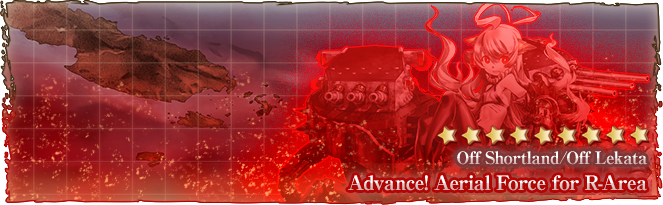
<style>
.page{position:relative;width:663px;height:205px}
.page>*{position:absolute;margin:0}
.t1{font:17px "RyuminPro-ExBold";letter-spacing:-0.04em}
.t2{font:20px "RyuminPro-ExBold";letter-spacing:-0.04em}
</style>
<div class="page">
<p class="t1" style="left:457px;top:151px;width:191px;height:14px">Off Shortland/Off Lekata</p>
<p class="t2" style="left:348px;top:175px;width:299px;height:16px">Advance! Aerial Force for R-Area</p>
</div>
